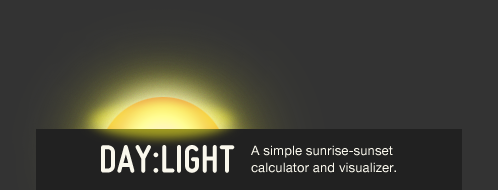
<style>
.page{position:relative;width:498px;height:190px;background:#333333}
.page>*{position:absolute;margin:0}
.t1{font:41px "Miso-Bold";letter-spacing:0.01em;color:#faf8ed}
.t2{font:13px/17px "HelveticaNeue";letter-spacing:0.01em;color:#faf8ed}
</style>
<div class="page">
<p class="t1" style="left:101px;top:145px;width:134px;height:28px">DAY:LIGHT</p>
<p class="t2" style="left:251px;top:145px;width:145px;height:28px">A simple sunrise-sunset<br>calculator and visualizer.</p>
</div>
